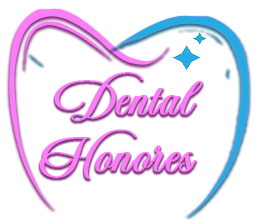
<style>
.page{position:relative;width:259px;height:224px;background:#ffffff}
.page>*{position:absolute;margin:0}
.t1{font:48px "Nathalia";color:#fd7cf8;font-weight:bold;scale:1.08 1}
</style>
<div class="page">
<p class="t1" style="left:39px;top:72px;width:164px;height:107px;text-align:center">Dental<br>Honores</p>
</div>
